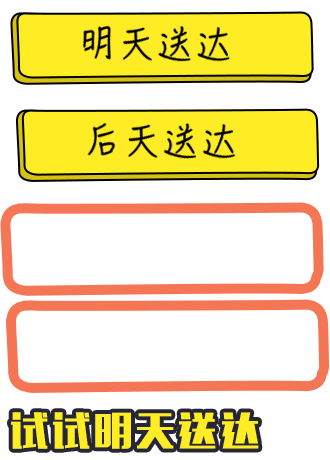
<style>
.page{position:relative;width:330px;height:460px;background:#ffffff}
.page>*{position:absolute;margin:0}
.t1{font:34.2px "HanziPenSC-W5";letter-spacing:0.1em;color:#000000}
.t2{font:38.3px "MFLiHei_Noncommercial-Regular";letter-spacing:0.1em;color:#feec24}
</style>
<div class="page">
<p class="t1" style="left:82px;top:24px;width:148px;height:39px;rotate:1deg">明天送达</p>
<p class="t1" style="left:87px;top:122px;width:149px;height:38px;rotate:1deg">后天送达</p>
<p class="t2" style="left:11px;top:412px;width:248px;height:37px">试试明天送达</p>
</div>
